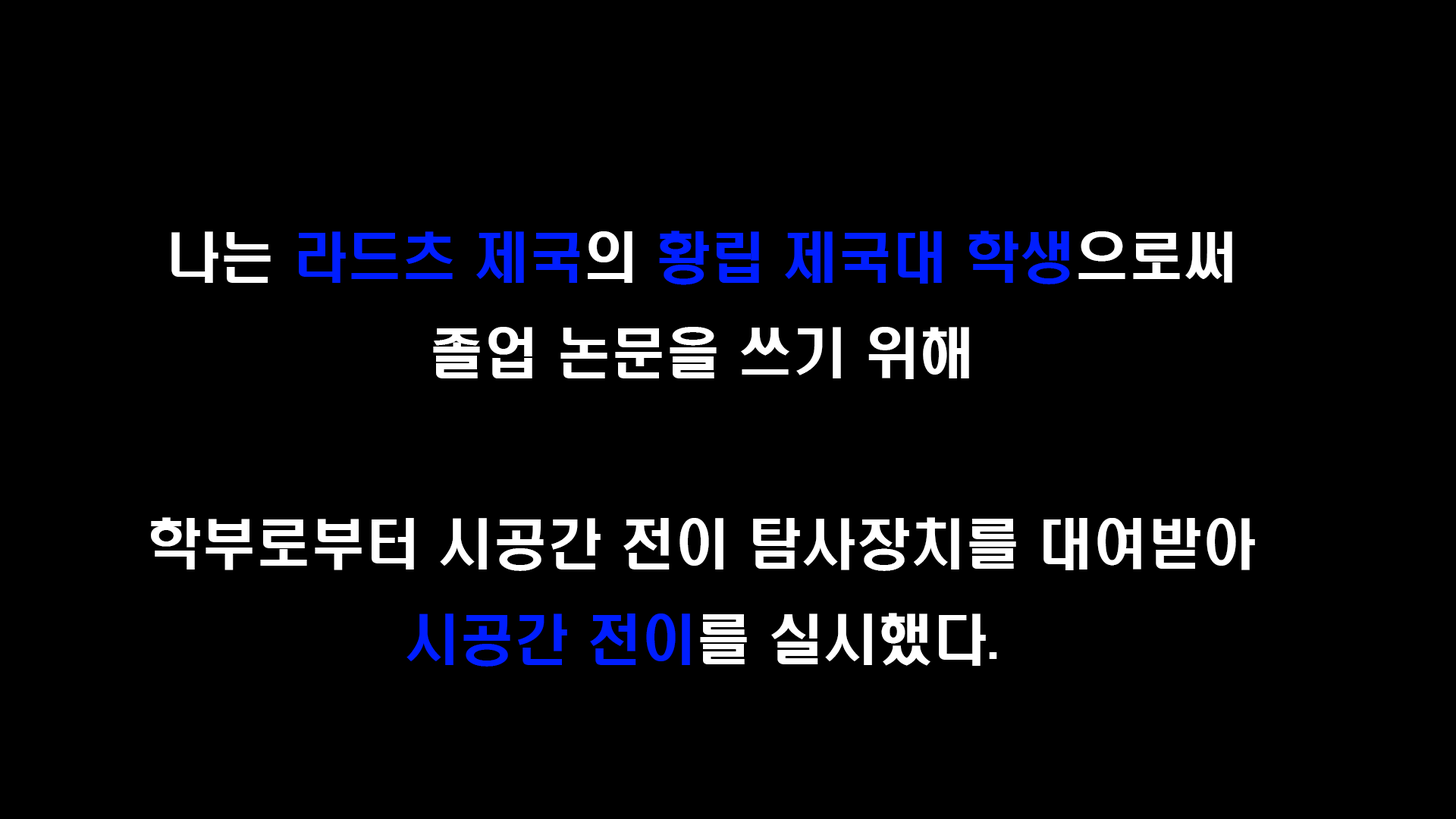
<style>
.page{position:relative;width:1456px;height:819px;background:#000000}
.page>*{position:absolute;margin:0}
.t1{font:54.6px "H2hdrM";color:#ffffff}
.t2{font:36.4px "Gulim";color:#ffffff}
.t3{font:54.6px "H2hdrM";color:#001eff}
</style>
<div class="page">
<p class="t1" style="left:151px;top:231px;width:1104px;height:436px;text-align:center"><span class="t2"><br><br></span>나는 <span class="t3">라드츠 제국</span>의 <span class="t3">황립 제국대 학생</span>으로써<br>졸업 논문을 쓰기 위해 <br><br>학부로부터 시공간 전이 탐사장치를 대여받아 <span class="t3">시공간 전이</span>를 실시했다.</p>
</div>
